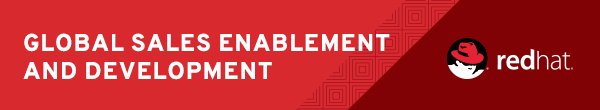
<style>
.page{position:relative;width:600px;height:110px;background:#d8292f}
.page>*{position:absolute;margin:0}
.t1{font:24px/28px "Overpass-Bold";letter-spacing:0.03em;color:#ffffff}
</style>
<div class="page">
<p class="t1" style="left:23px;top:33px;width:367px;height:47px">GLOBAL SALES ENABLEMENT AND DEVELOPMENT</p>
</div>
